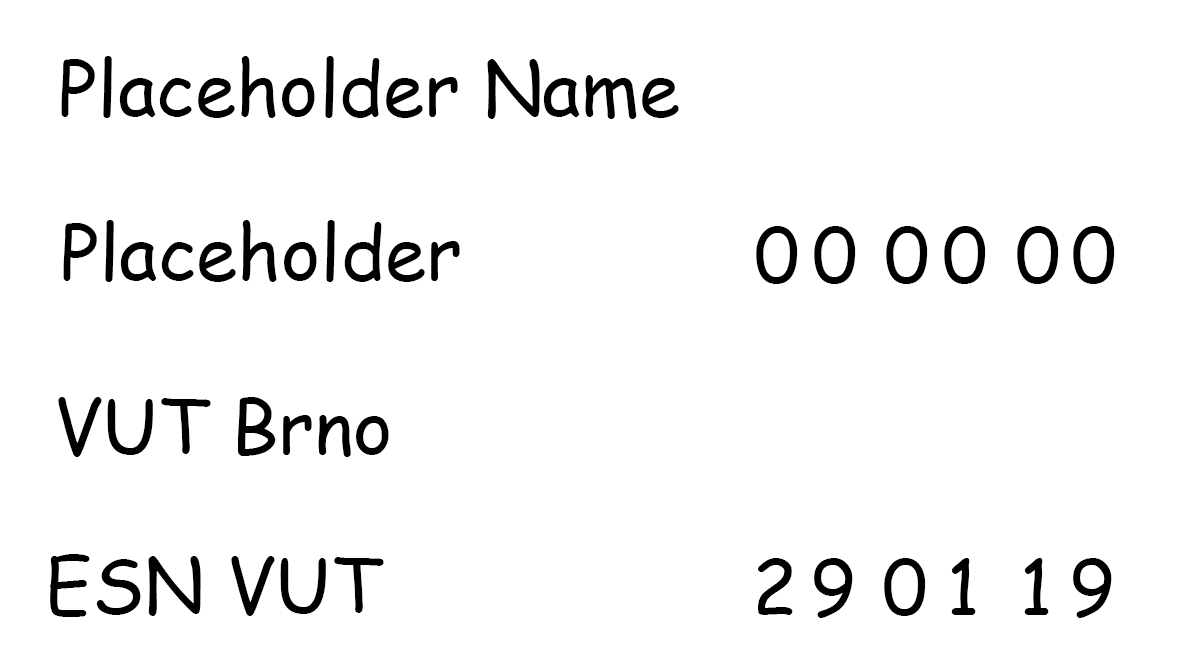
<style>
.page{position:relative;width:1181px;height:650px;background:#ffffff}
.page>*{position:absolute;margin:0}
.t1{font:75px "ComicSansMS";color:#000000}
</style>
<div class="page">
<p class="t1" style="left:61px;top:56px;width:618px;height:63px">Placeholder Name</p>
<p class="t1" style="left:63px;top:220px;width:397px;height:62px">Placeholder</p>
<p class="t1" style="left:756px;top:226px;width:42px;height:58px">0</p>
<p class="t1" style="left:814px;top:226px;width:42px;height:58px">0</p>
<p class="t1" style="left:886px;top:226px;width:42px;height:58px">0</p>
<p class="t1" style="left:944px;top:226px;width:42px;height:58px">0</p>
<p class="t1" style="left:1017px;top:226px;width:42px;height:58px">0</p>
<p class="t1" style="left:1073px;top:226px;width:42px;height:58px">0</p>
<p class="t1" style="left:58px;top:397px;width:331px;height:60px">VUT Brno</p>
<p class="t1" style="left:50px;top:554px;width:334px;height:63px">ESN VUT</p>
<p class="t1" style="left:758px;top:558px;width:35px;height:57px">2</p>
<p class="t1" style="left:814px;top:558px;width:39px;height:60px">9</p>
<p class="t1" style="left:884px;top:558px;width:42px;height:58px">0</p>
<p class="t1" style="left:951px;top:558px;width:25px;height:57px">1</p>
<p class="t1" style="left:1024px;top:558px;width:25px;height:57px">1</p>
<p class="t1" style="left:1073px;top:558px;width:39px;height:60px">9</p>
</div>
